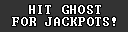
<style>
.page{position:relative;width:128px;height:32px;background:#333333}
.page>*{position:absolute;margin:0}
.t1{font:12px/11.9px "Terminal";letter-spacing:0.075em;color:#ffffff}
</style>
<div class="page">
<p class="t1" style="left:12px;top:5px;width:104px;height:21px;text-align:center">HIT GHOST<br>FOR JACKPOTS!</p>
</div>
